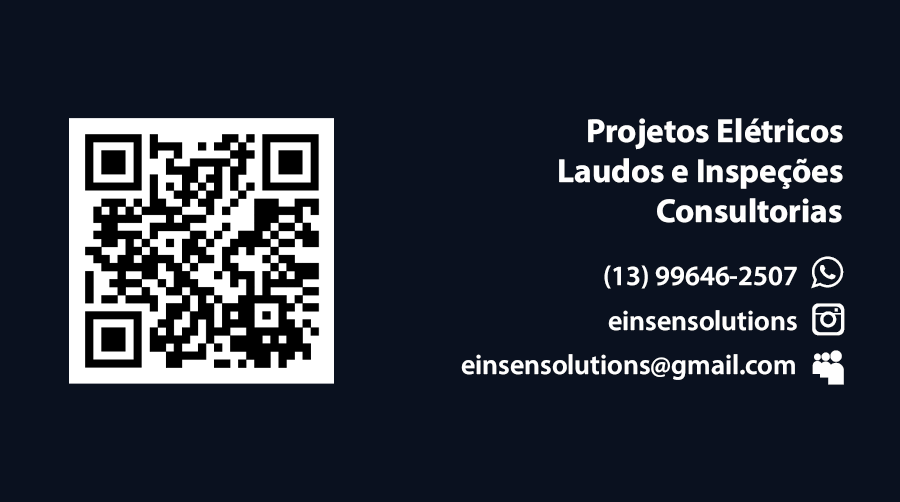
<style>
.page{position:relative;width:900px;height:502px;background:#0a111f}
.page>*{position:absolute;margin:0}
.t1{font:33.3px "MyriadConceptRoman-Bold";color:#fefefe}
.t2{font:27.8px "MyriadConceptRoman-Semibold";color:#fefefe}
</style>
<div class="page">
<p class="t1" style="left:588px;top:118px;width:255px;height:32px">Projetos Elétricos</p>
<p class="t1" style="left:559px;top:158px;width:284px;height:31px">Laudos e Inspeções</p>
<p class="t1" style="left:657px;top:198px;width:185px;height:25px">Consultorias</p>
<p class="t2" style="left:604px;top:265px;width:193px;height:24px">(13) 99646-2507</p>
<p class="t2" style="left:608px;top:310px;width:189px;height:21px">einsensolutions</p>
<p class="t2" style="left:461px;top:354px;width:334px;height:26px">einsensolutions@gmail.com</p>
</div>
